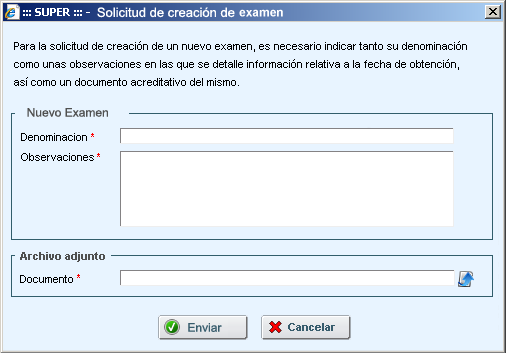
<style>
.page{position:relative;width:506px;height:353px;background:#e8f4ff}
.page>*{position:absolute;margin:0}
.t1{font:12px "Arial-BoldMT";color:#ffffff}
.t2{font:11px "ArialMT";color:#ffffff}
.t3{font:11px/18px "ArialMT";color:#000000}
.t4{font:12px "ArialMT";color:#505050}
</style>
<div class="page">
<p class="t1" style="left:239px;top:9px;width:44px;height:8px"><span class="t2"> </span>examen</p>
<p class="t3" style="left:14px;top:41px;width:453px;height:45px">Para la solicitud de creación de un nuevo examen, es necesario indicar tanto su denominación<br>como unas observaciones en las que se detalle información relativa a la fecha de obtención, <br>así como un documento acreditativo del mismo.</p>
<p class="t4" style="left:27px;top:108px;width:81px;height:9px">Nuevo Examen</p>
</div>
